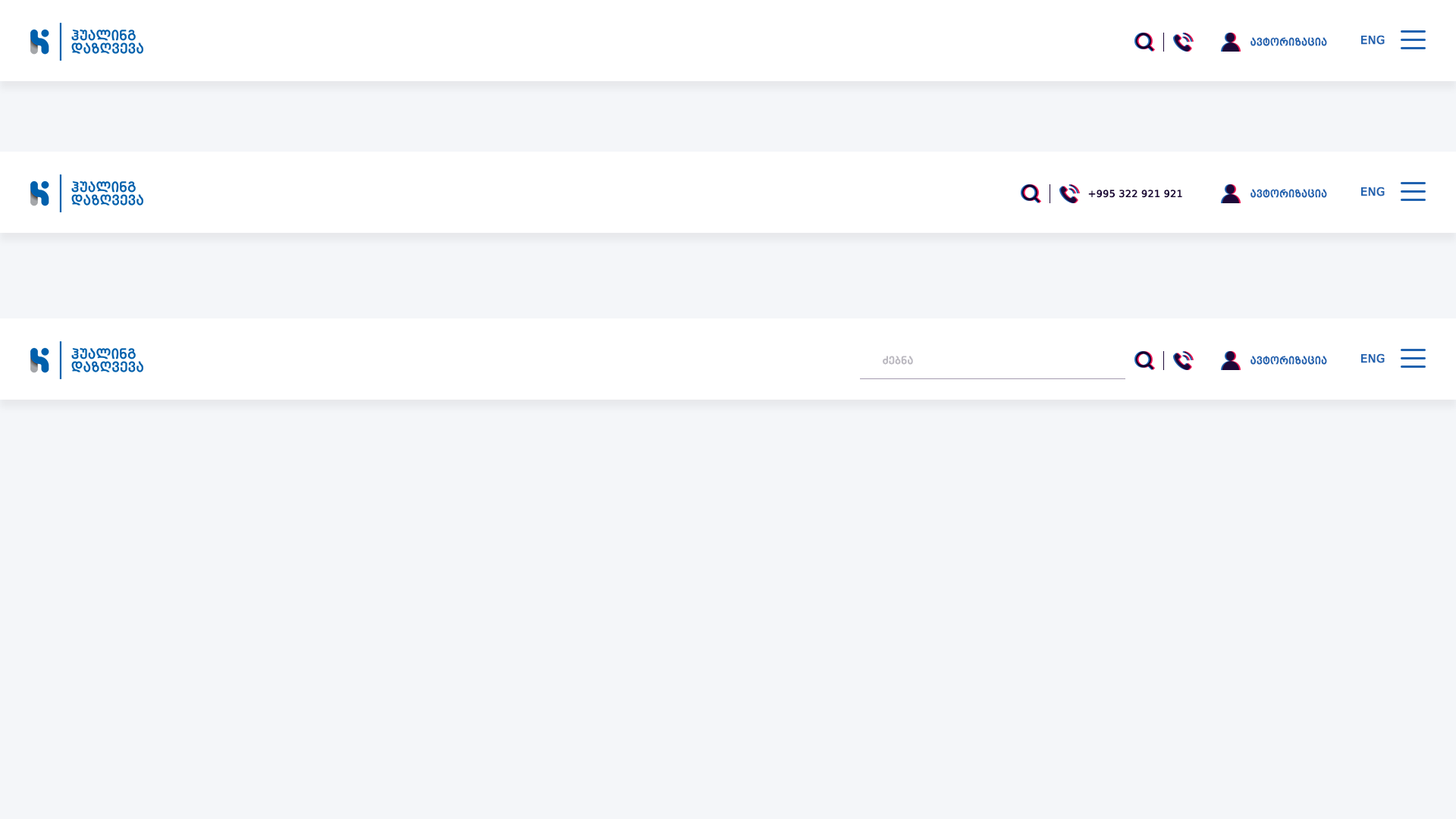
<style>
.page{position:relative;width:1456px;height:819px;background:#f4f6f9}
.page>*{position:absolute;margin:0}
.t1{font:10.6px "BPGWEB001Caps";color:#2062af}
.t2{font:12.1px "BPGWEB001Caps";color:#2062af;text-transform:uppercase}
.t3{font:10.6px "BPGWEB001Caps";color:#1d0838}
.t4{font:10.6px "BPGWEB001Caps";color:#bbb9c0}
</style>
<div class="page">
<p class="t1" style="left:1250px;top:37px;width:77px;height:9px">ავტორიზაცია</p>
<p class="t2" style="left:1361px;top:35px;width:24px;height:10px">Eng</p>
<p class="t3" style="left:1088px;top:190px;width:94px;height:8px">+995 322 921 921</p>
<p class="t1" style="left:1250px;top:189px;width:77px;height:9px">ავტორიზაცია</p>
<p class="t2" style="left:1361px;top:187px;width:24px;height:9px">Eng</p>
<p class="t2" style="left:1361px;top:353px;width:24px;height:10px">Eng</p>
<p class="t4" style="left:883px;top:356px;width:30px;height:9px">ძებნა</p>
<p class="t1" style="left:1250px;top:356px;width:77px;height:9px">ავტორიზაცია</p>
</div>
